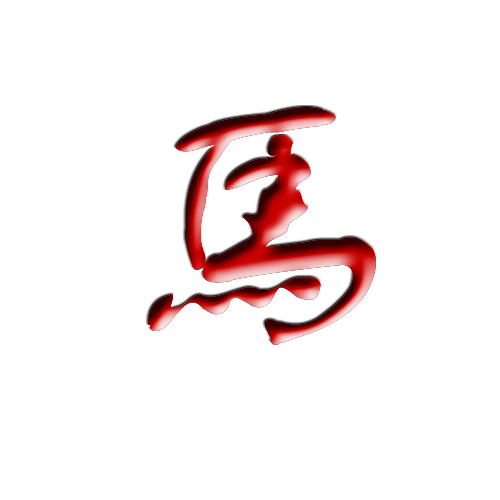
<style>
.page{position:relative;width:500px;height:500px;background:#ffffff}
.page>*{position:absolute;margin:0}
.t1{font:320px "FZSTK--GBK1-0"}
</style>
<div class="page">
<p class="t1" style="left:147px;top:107px;width:229px;height:238px">馬</p>
</div>
